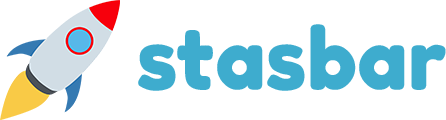
<style>
.page{position:relative;width:446px;height:120px;background:#ffffff}
.page>*{position:absolute;margin:0}
.t1{font:85px "FredokaOne-Regular";color:#3eacce}
</style>
<div class="page">
<p class="t1" style="left:138px;top:24px;width:308px;height:67px">stasbar</p>
</div>
